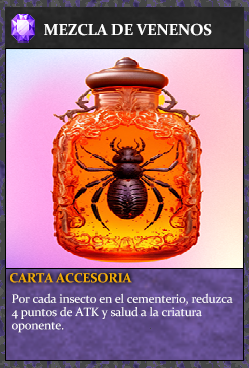
<style>
.page{position:relative;width:249px;height:368px}
.page>*{position:absolute;margin:0}
.t1{font:16px "Constantia-Bold";letter-spacing:-0.02em;color:#ffffff}
.t2{font:13.3px "Constantia-Bold";letter-spacing:-0.02em;color:#f2ac05}
.t3{font:12.3px/13.3px "Constantia";letter-spacing:-0.02em;color:#ffffff}
</style>
<div class="page">
<p class="t1" style="left:44px;top:23px;width:168px;height:13px">MEZCLA DE VENENOS</p>
<p class="t2" style="left:10px;top:273px;width:122px;height:10px">CARTA ACCESORIA</p>
<p class="t3" style="left:11px;top:293px;width:222px;height:40px">Por cada insecto en el cementerio, reduzca<br>4 puntos de ATK y salud a la criatura <br>oponente.</p>
</div>
